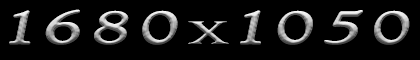
<style>
.page{position:relative;width:420px;height:60px;background:#000000}
.page>*{position:absolute;margin:0}
.t1{font:48px "GoudyOldStyleT-Italic";letter-spacing:0.075em;font-variant:small-caps;font-weight:bold;scale:1.67 1}
.t2{font:36px "RingbearerMedium";letter-spacing:0.075em;scale:1.67 1}
</style>
<div class="page">
<p class="t1" style="left:9px;top:9px;width:401px;height:36px">1680<span class="t2">x</span>1050</p>
<p class="t1" style="left:9px;top:9px;width:401px;height:36px">1680<span class="t2">x</span>1050</p>
</div>
